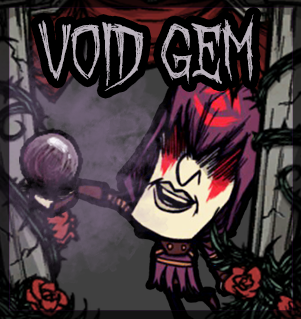
<style>
.page{position:relative;width:301px;height:319px}
.page>*{position:absolute;margin:0}
.t1{font:67.3px "OctoberCrow";color:#bbb3bd}
</style>
<div class="page">
<p class="t1" style="left:38px;top:14px;width:216px;height:77px">Void Gem</p>
</div>
